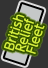
<style>
.page{position:relative;width:48px;height:68px;background:#333333}
.page>*{position:absolute;margin:0}
.t1{font:12px/11px "UDShinGoPro-Light";color:#d6f03e;font-weight:bold}
</style>
<div class="page">
<p class="t1" style="left:4px;top:14px;width:41px;height:40px;text-align:center;rotate:-72deg">British<br>Relief<br>Fleet</p>
</div>
